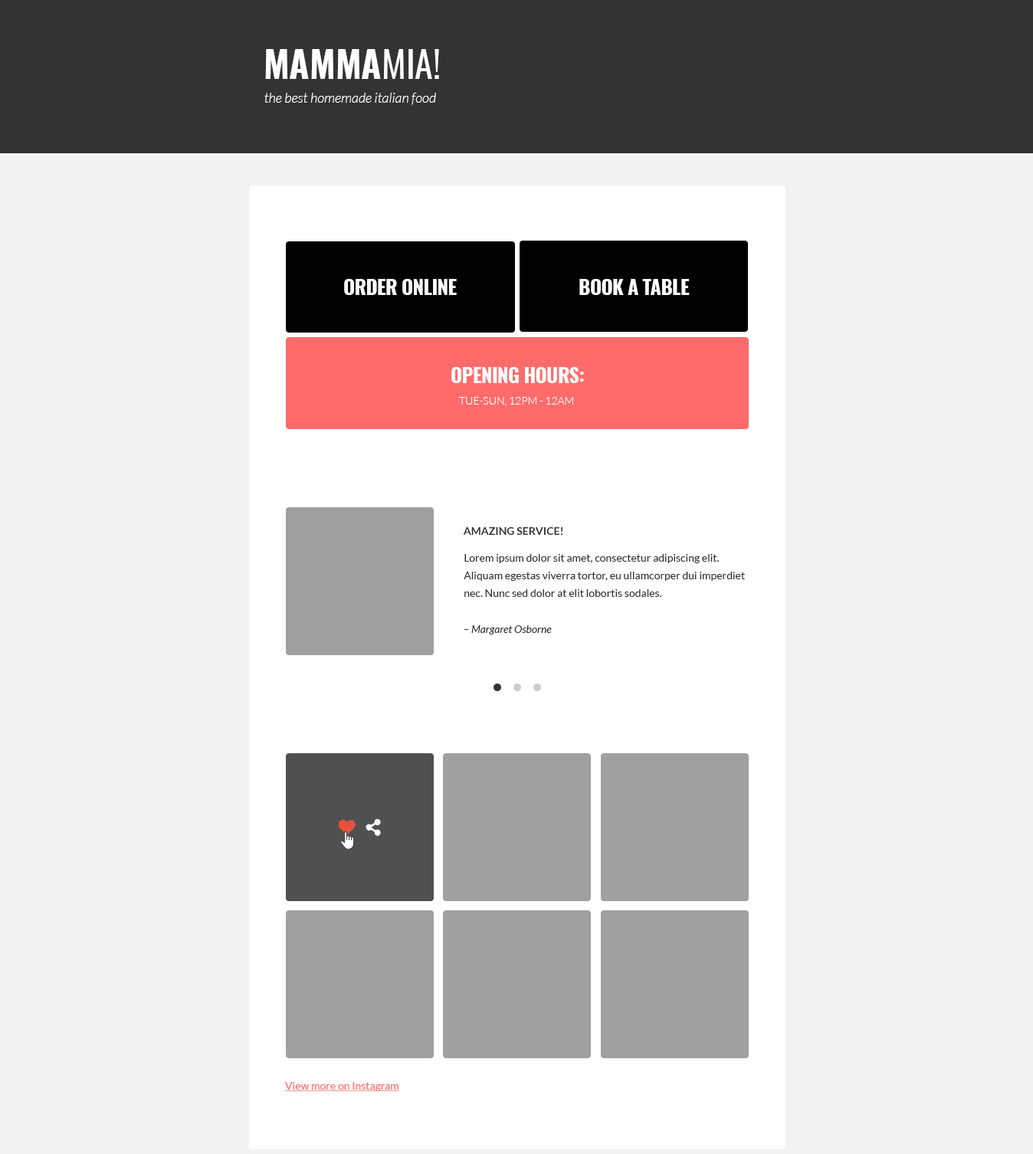
<style>
.page{position:relative;width:1033px;height:1154px;background:#f2f2f2}
.page>*{position:absolute;margin:0}
.t1{font:36.8px "Oswald-Bold";color:#ffffff}
.t2{font:36.8px "Oswald-Regular";color:#ffffff}
.t3{font:13.8px "Lato-LightItalic";color:#ffffff}
.t4{font:19.9px "Oswald-Bold";letter-spacing:-0.025em;color:#ffffff}
.t5{font:10.7px "Lato-Light";color:#ffffff}
.t6{font:10.7px "Lato-Bold";color:#333333}
.t7{font:10.7px/17.6px "Lato-Regular";color:#333333}
.t8{font:10.7px "Lato-Italic";color:#333333}
.t9{font:10.7px "Lato-Regular";color:#ff6b6b;text-decoration:underline}
</style>
<div class="page">
<p class="t1" style="left:265px;top:49px;width:174px;height:30px">MAMMA<span class="t2">MIA!</span></p>
<p class="t3" style="left:264px;top:93px;width:172px;height:12px">the best homemade italian food</p>
<p class="t4" style="left:344px;top:279px;width:113px;height:16px">ORDER ONLINE</p>
<p class="t4" style="left:579px;top:279px;width:111px;height:16px">BOOK A TABLE</p>
<p class="t4" style="left:451px;top:367px;width:133px;height:16px">OPENING HOURS:</p>
<p class="t5" style="left:459px;top:397px;width:114px;height:9px">TUE-SUN, 12PM - 12AM</p>
<p class="t6" style="left:463px;top:527px;width:100px;height:8px">AMAZING SERVICE!</p>
<p class="t7" style="left:464px;top:554px;width:281px;height:43px">Lorem ipsum dolor sit amet, consectetur adipiscing elit. Aliquam egestas viverra tortor, eu ullamcorper dui imperdiet nec. Nunc sed dolor at elit lobortis sodales.</p>
<p class="t8" style="left:464px;top:625px;width:88px;height:10px">– Margaret Osborne</p>
<p class="t9" style="left:285px;top:1082px;width:114px;height:9px">View more on Instagram</p>
</div>
